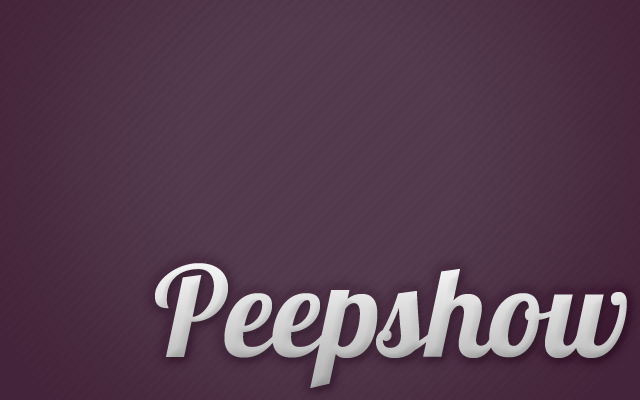
<style>
.page{position:relative;width:640px;height:400px}
.page>*{position:absolute;margin:0}
.t1{font:125px "Lobster1.4";color:#cecece}
</style>
<div class="page">
<p class="t1" style="left:155px;top:263px;width:472px;height:125px">Peepshow</p>
</div>
